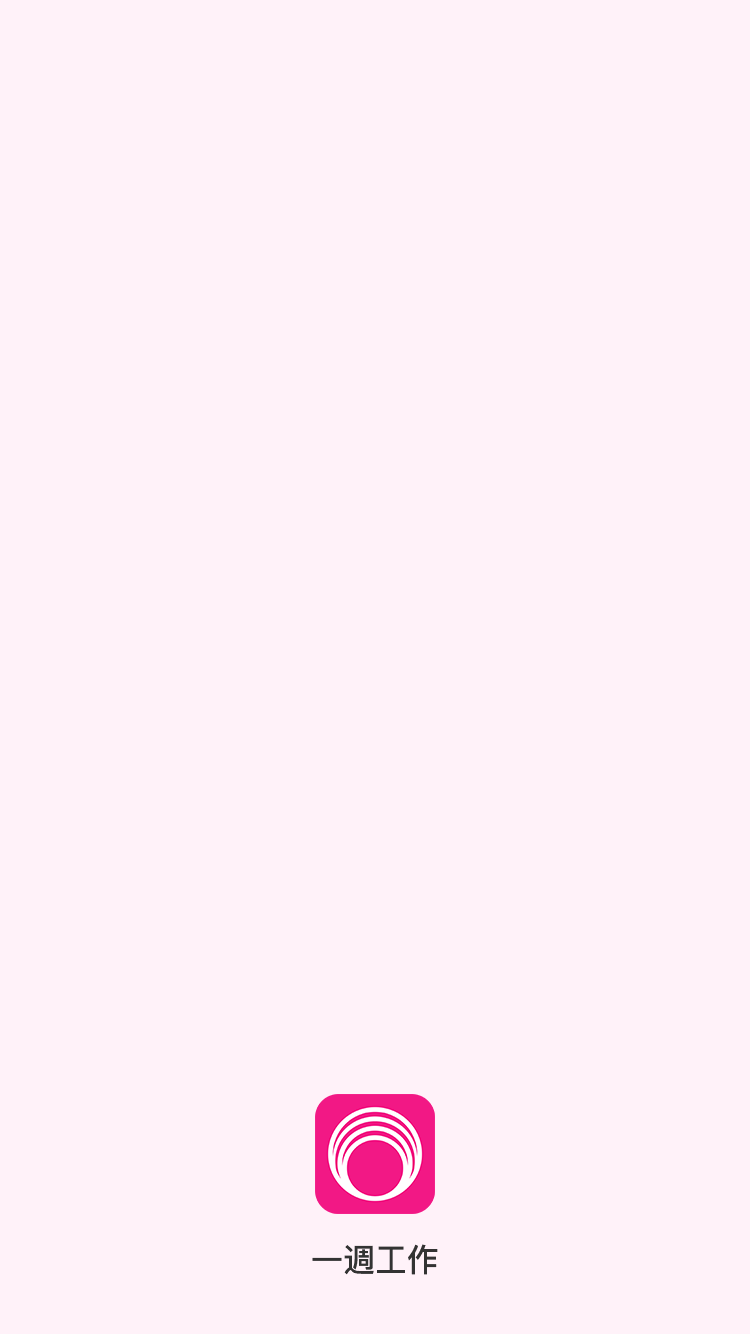
<style>
.page{position:relative;width:750px;height:1334px;background:#fff2f9}
.page>*{position:absolute;margin:0}
.t1{font:32px "PingFang-SC-Bold";color:#333333}
</style>
<div class="page">
<p class="t1" style="left:312px;top:1244px;width:126px;height:31px">一週工作</p>
</div>
